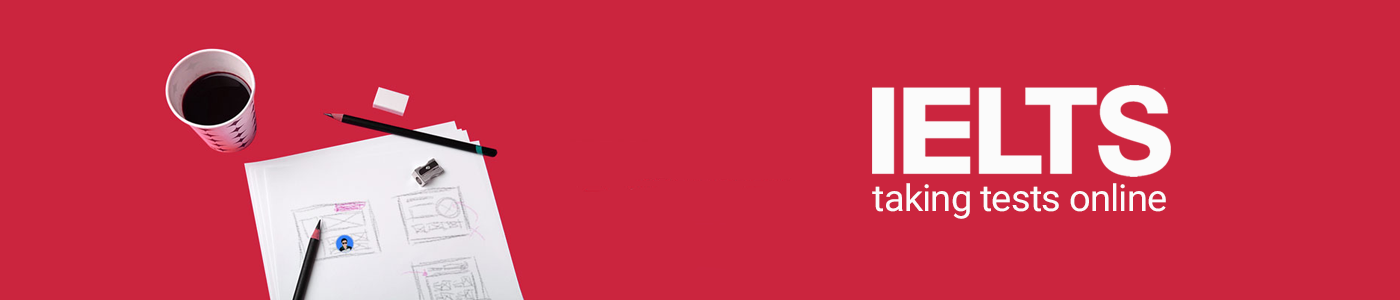
<style>
.page{position:relative;width:1400px;height:300px;background:#cb253e}
.page>*{position:absolute;margin:0}
.t1{font:36.9px "Roboto-Regular";letter-spacing:-0.02em;color:#fbfbfb}
</style>
<div class="page">
<p class="t1" style="left:872px;top:183px;width:294px;height:36px">taking tests online</p>
</div>
